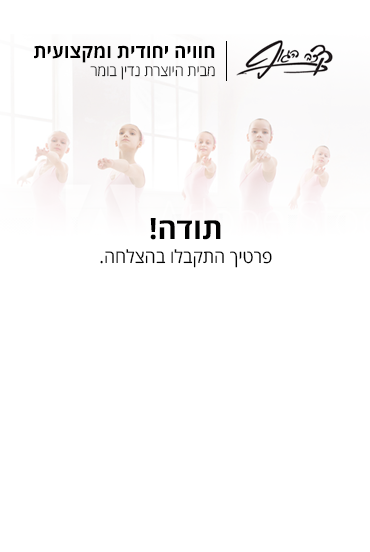
<style>
.page{position:relative;width:370px;height:552px;background:#ffffff}
.page>*{position:absolute;margin:0}
.t1{font:19.1px "OpenSansHebrew-Bold";color:#000000}
.t2{font:15px "OpenSansHebrew-Light"}
.t3{font:18px/24.2px "OpenSansHebrew-Regular";color:#010101}
.t4{font:29.4px/24.2px "OpenSansHebrew-Bold";color:#010101}
</style>
<div class="page">
<p class="t1" style="left:34px;top:45px;width:181px;height:18px">חוויה יחודית ומקצועית</p>
<p class="t2" style="left:90px;top:66px;width:125px;height:14px">מבית היוצרת נדין בומר</p>
<p class="t3" style="left:100px;top:218px;width:172px;height:50px;text-align:center"><span class="t4">תודה!<br></span>פרטיך התקבלו בהצלחה.</p>
</div>
